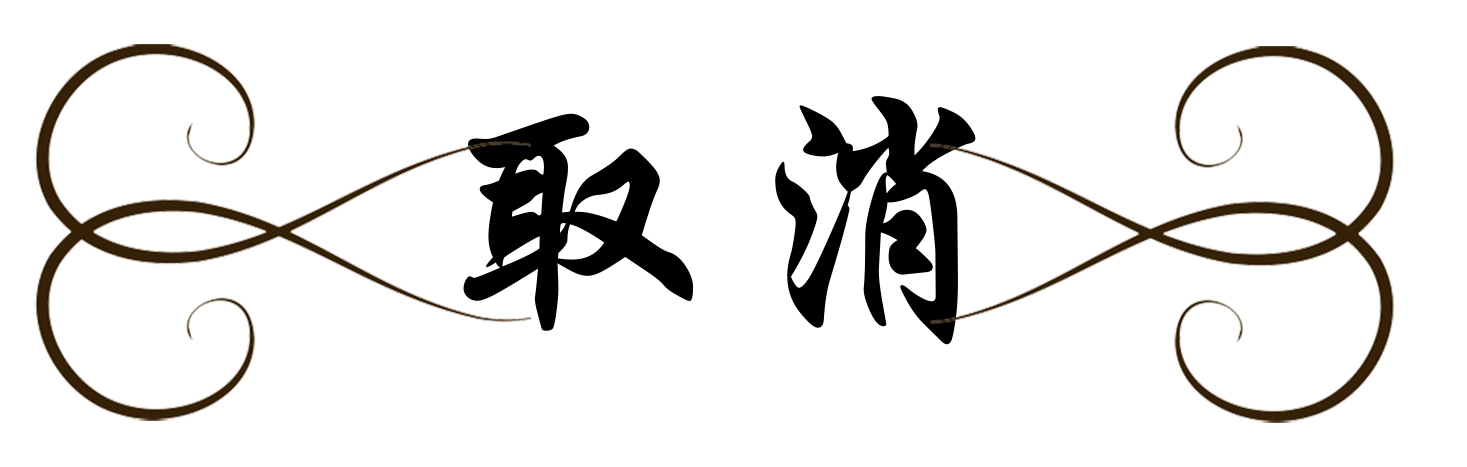
<style>
.page{position:relative;width:1467px;height:467px;background:#ffffff}
.page>*{position:absolute;margin:0}
.t1{font:300px "STXingkai";color:#000000}
</style>
<div class="page">
<p class="t1" style="left:463px;top:96px;width:513px;height:249px">取消</p>
</div>
